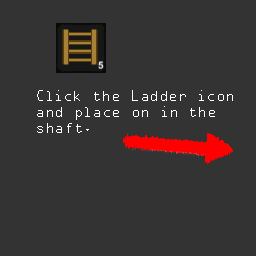
<style>
.page{position:relative;width:256px;height:256px;background:#333333}
.page>*{position:absolute;margin:0}
.t1{font:13.3px "OCRAStd";color:#ffffff}
</style>
<div class="page">
<p class="t1" style="left:37px;top:90px;width:196px;height:43px">Click the Ladder icon<br>and place on in the<br>shaft.</p>
</div>
